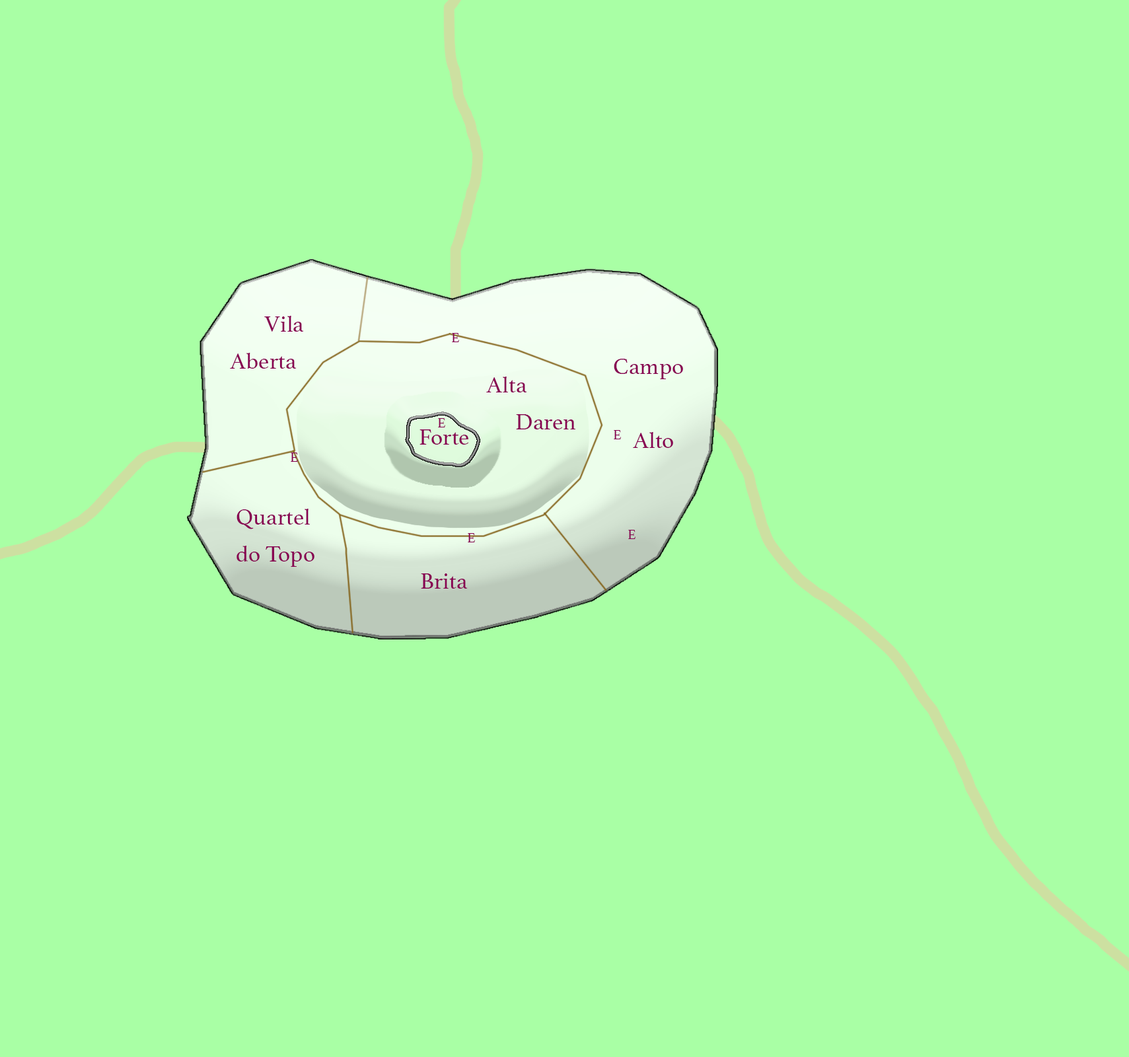
<style>
.page{position:relative;width:1129px;height:1057px;background:#a9ffa5}
.page>*{position:absolute;margin:0}
.t1{font:23.3px/37.3px "Athelas-Regular";color:#880052}
.t2{font:14px "Athelas-Regular";color:#880052}
.t3{font:23.3px "Athelas-Regular";color:#880052}
</style>
<div class="page">
<p class="t1" style="left:230px;top:316px;width:74px;height:52px">Vila<br>Aberta</p>
<p class="t2" style="left:452px;top:333px;width:7px;height:9px">E</p>
<p class="t2" style="left:452px;top:333px;width:7px;height:9px">E</p>
<p class="t2" style="left:452px;top:333px;width:7px;height:9px">E</p>
<p class="t2" style="left:452px;top:333px;width:7px;height:9px">E</p>
<p class="t2" style="left:452px;top:333px;width:7px;height:9px">E</p>
<p class="t2" style="left:452px;top:333px;width:7px;height:9px">E</p>
<p class="t2" style="left:452px;top:333px;width:7px;height:9px">E</p>
<p class="t1" style="left:613px;top:359px;width:70px;height:89px">Campo<br><br>    Alto</p>
<p class="t1" style="left:486px;top:376px;width:89px;height:53px">Alta<br>      Daren</p>
<p class="t2" style="left:438px;top:418px;width:7px;height:9px">E</p>
<p class="t2" style="left:438px;top:418px;width:7px;height:9px">E</p>
<p class="t2" style="left:438px;top:418px;width:7px;height:9px">E</p>
<p class="t2" style="left:438px;top:418px;width:7px;height:9px">E</p>
<p class="t2" style="left:438px;top:418px;width:7px;height:9px">E</p>
<p class="t2" style="left:438px;top:418px;width:7px;height:9px">E</p>
<p class="t2" style="left:438px;top:418px;width:7px;height:9px">E</p>
<p class="t3" style="left:419px;top:429px;width:50px;height:15px">Forte</p>
<p class="t2" style="left:613px;top:430px;width:8px;height:9px">E</p>
<p class="t2" style="left:613px;top:430px;width:8px;height:9px">E</p>
<p class="t2" style="left:613px;top:430px;width:8px;height:9px">E</p>
<p class="t2" style="left:613px;top:430px;width:8px;height:9px">E</p>
<p class="t2" style="left:613px;top:430px;width:8px;height:9px">E</p>
<p class="t2" style="left:291px;top:452px;width:7px;height:10px">E</p>
<p class="t2" style="left:291px;top:452px;width:7px;height:10px">E</p>
<p class="t2" style="left:291px;top:452px;width:7px;height:10px">E</p>
<p class="t2" style="left:291px;top:452px;width:7px;height:10px">E</p>
<p class="t2" style="left:291px;top:452px;width:7px;height:10px">E</p>
<p class="t2" style="left:291px;top:452px;width:7px;height:10px">E</p>
<p class="t1" style="left:236px;top:508px;width:78px;height:59px">Quartel<br>do Topo</p>
<p class="t2" style="left:468px;top:533px;width:7px;height:9px">E</p>
<p class="t2" style="left:468px;top:533px;width:7px;height:9px">E</p>
<p class="t2" style="left:468px;top:533px;width:7px;height:9px">E</p>
<p class="t2" style="left:468px;top:533px;width:7px;height:9px">E</p>
<p class="t2" style="left:468px;top:533px;width:7px;height:9px">E</p>
<p class="t2" style="left:468px;top:533px;width:7px;height:9px">E</p>
<p class="t2" style="left:628px;top:530px;width:7px;height:9px">E</p>
<p class="t2" style="left:628px;top:530px;width:7px;height:9px">E</p>
<p class="t2" style="left:628px;top:530px;width:7px;height:9px">E</p>
<p class="t2" style="left:628px;top:530px;width:7px;height:9px">E</p>
<p class="t2" style="left:628px;top:530px;width:7px;height:9px">E</p>
<p class="t3" style="left:421px;top:573px;width:47px;height:15px">Brita</p>
</div>
